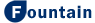
<style>
.page{position:relative;width:95px;height:23px;background:#ffffff}
.page>*{position:absolute;margin:0}
.t1{font:17.9px "FranklinGothic-Demi";letter-spacing:0.05em;color:#fefeff}
.t2{font:17.9px "FranklinGothic-Demi";letter-spacing:0.05em;color:#002f6c}
</style>
<div class="page">
<p class="t1" style="left:12px;top:6px;width:9px;height:12px">F</p>
<p class="t2" style="left:17px;top:5px;width:75px;height:14px">Fountain</p>
</div>
